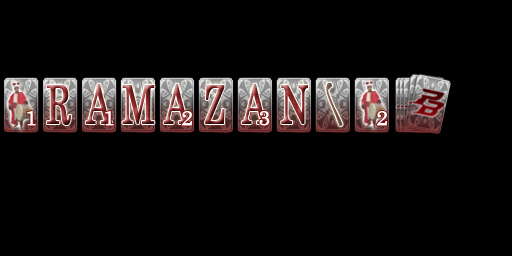
<style>
.page{position:relative;width:512px;height:256px;background:#000000}
.page>*{position:absolute;margin:0}
.t1{font:51.7px "CenturySchoolbook";font-weight:bold;scale:0.66 1}
.t2{font:21px "CenturySchoolbook";color:#ffffff;font-weight:bold}
</style>
<div class="page">
<p class="t1" style="left:46px;top:85px;width:25px;height:40px">R</p>
<p class="t1" style="left:85px;top:84px;width:27px;height:40px">A</p>
<p class="t1" style="left:122px;top:85px;width:33px;height:39px">M</p>
<p class="t1" style="left:163px;top:84px;width:27px;height:40px">A</p>
<p class="t1" style="left:205px;top:85px;width:20px;height:39px">Z</p>
<p class="t1" style="left:241px;top:84px;width:27px;height:40px">A</p>
<p class="t1" style="left:281px;top:85px;width:27px;height:39px">N</p>
<p class="t2" style="left:27px;top:111px;width:9px;height:15px">1</p>
<p class="t2" style="left:105px;top:111px;width:9px;height:15px">1</p>
<p class="t2" style="left:181px;top:111px;width:11px;height:15px">2</p>
<p class="t2" style="left:259px;top:111px;width:11px;height:15px">3</p>
<p class="t2" style="left:376px;top:111px;width:11px;height:15px">2</p>
</div>
